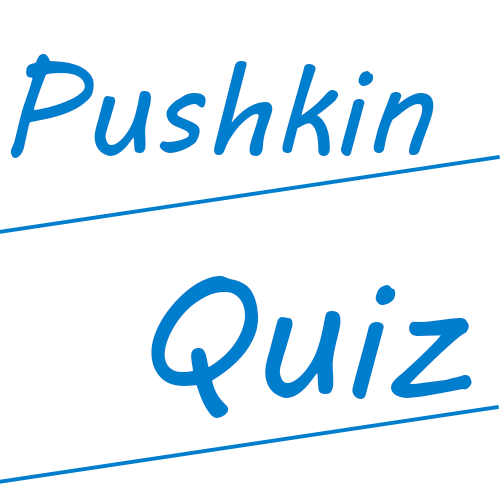
<style>
.page{position:relative;width:500px;height:500px;background:#ffffff}
.page>*{position:absolute;margin:0}
.t1{font:125px "MVBoli";color:#007ece}
.t2{font:166.7px "MVBoli";color:#007ece}
</style>
<div class="page">
<p class="t1" style="left:10px;top:54px;width:424px;height:104px">Pushkin</p>
<p class="t2" style="left:151px;top:276px;width:321px;height:142px">Quiz</p>
</div>
